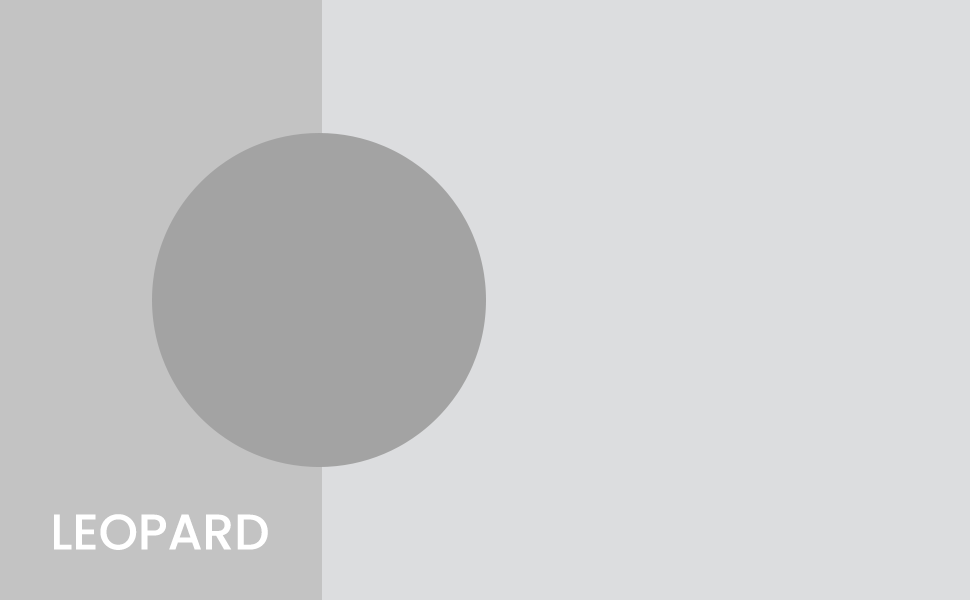
<style>
.page{position:relative;width:970px;height:600px;background:#dcdddf}
.page>*{position:absolute;margin:0}
.t1{font:50px "Poppins-Medium";color:#ffffff;text-transform:uppercase}
</style>
<div class="page">
<p class="t1" style="left:54px;top:514px;width:214px;height:36px">LEOPARD</p>
</div>
